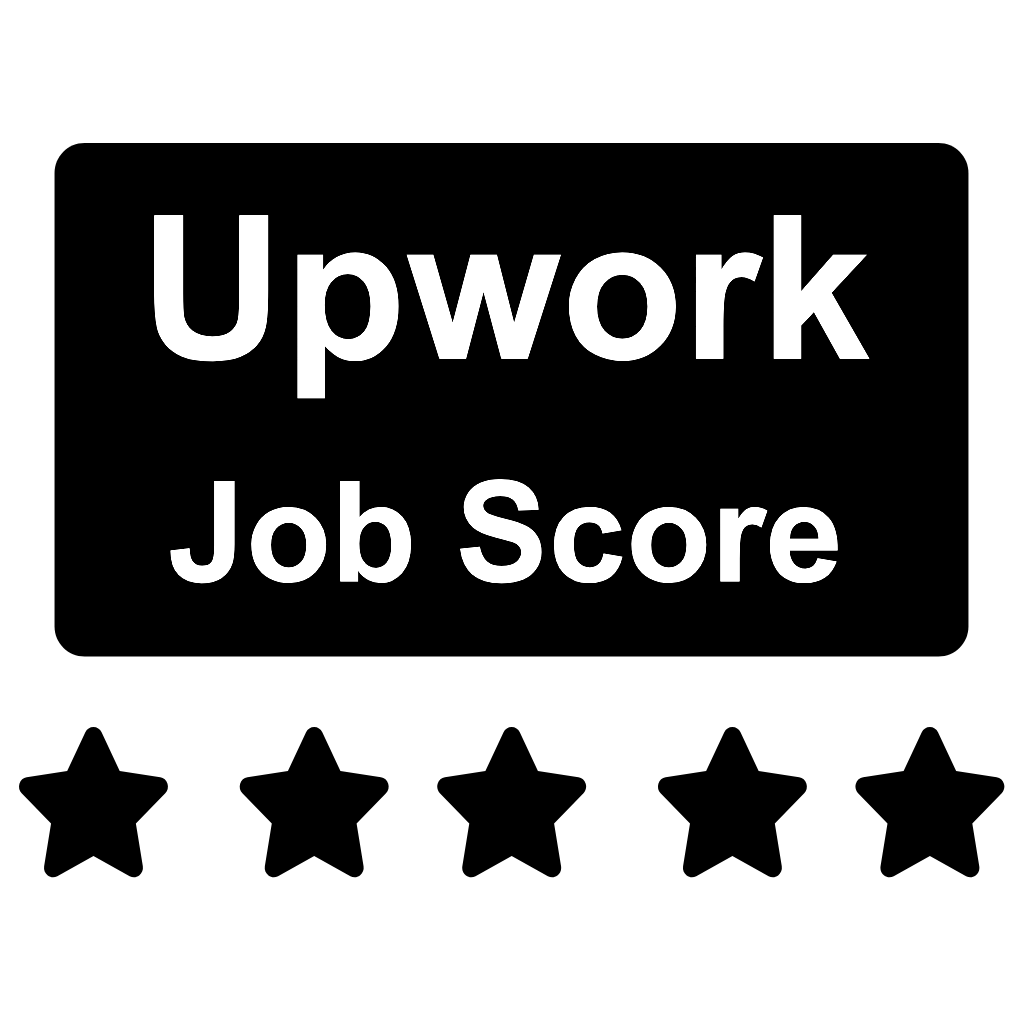
<style>
.page{position:relative;width:1024px;height:1024px;background:#ffffff}
.page>*{position:absolute;margin:0}
.t1{font:140.4px "Arial-BoldMT";color:#ffffff}
.t2{font:200.5px "Arial-BoldMT";color:#ffffff}
</style>
<div class="page">
<p class="t1" style="left:154px;top:215px;width:716px;height:369px;text-align:center"><span class="t2">Upwork<br><br></span>Job Score</p>
</div>
